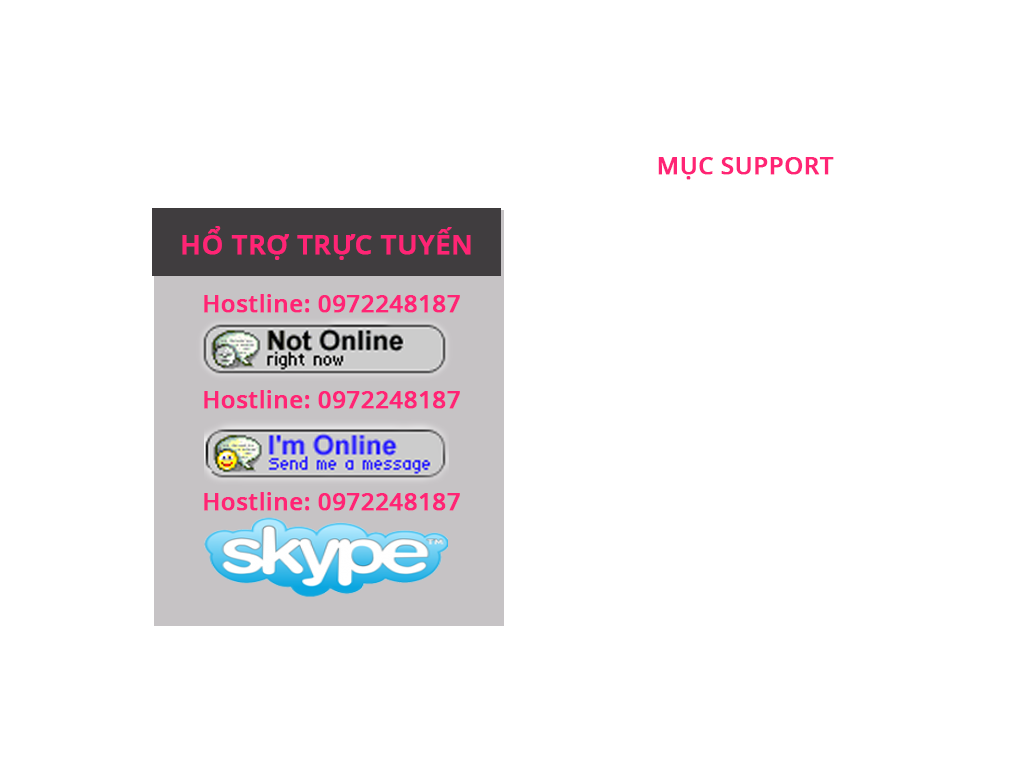
<style>
.page{position:relative;width:1024px;height:768px;background:#ffffff}
.page>*{position:absolute;margin:0}
.t1{font:24px "OpenSans-Semibold";color:#ff2475;font-weight:bold}
.t2{font:27.4px "OpenSans-Semibold";color:#ff2475;font-weight:bold}
</style>
<div class="page">
<p class="t1" style="left:658px;top:157px;width:176px;height:23px">MỤC SUPPORT</p>
<p class="t2" style="left:182px;top:226px;width:289px;height:34px">HỔ TRỢ TRỰC TUYẾN</p>
<p class="t1" style="left:204px;top:294px;width:256px;height:19px">Hostline: 0972248187</p>
<p class="t1" style="left:204px;top:390px;width:256px;height:19px">Hostline: 0972248187</p>
<p class="t1" style="left:204px;top:492px;width:256px;height:19px">Hostline: 0972248187</p>
</div>
